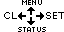
<style>
.page{position:relative;width:64px;height:32px;background:#ffffff}
.page>*{position:absolute;margin:0}
.t1{font:8px "04b03";color:#000000;scale:1.06 1}
.t2{font:10px "Verdana";color:#000000}
</style>
<div class="page">
<p class="t1" style="left:22px;top:0px;width:20px;height:5px">MENU</p>
<p class="t2" style="left:4px;top:12px;width:13px;height:7px">CL</p>
<p class="t2" style="left:46px;top:12px;width:19px;height:7px">SET</p>
<p class="t1" style="left:18px;top:27px;width:28px;height:5px">STATUS</p>
</div>
